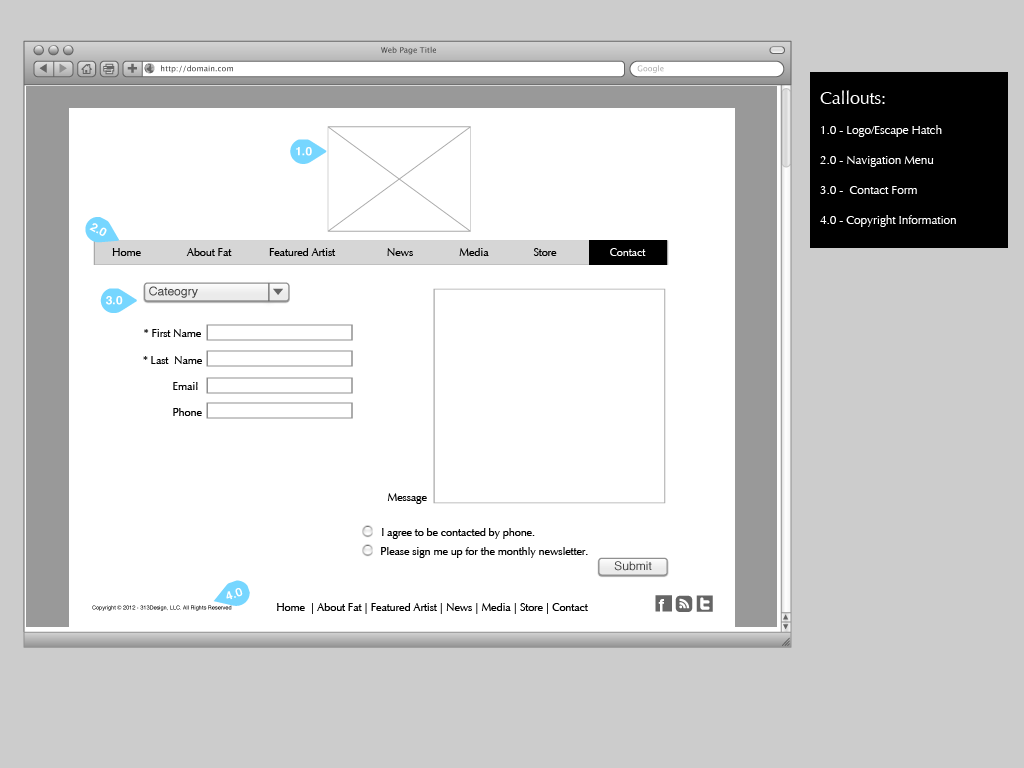
<style>
.page{position:relative;width:1024px;height:768px;background:#ffffff}
.page>*{position:absolute;margin:0}
.t1{font:12px/30px "Optima-Regular";letter-spacing:-0.015em;color:#ffffff}
.t2{font:18px/30px "Optima-Regular";letter-spacing:-0.015em;color:#ffffff}
.t3{font:11px "Optima-Regular";letter-spacing:-0.015em;color:#000000}
.t4{font:11px "Optima-Regular";letter-spacing:-0.015em;color:#ffffff}
</style>
<div class="page">
<p class="t1" style="left:820px;top:90px;width:136px;height:137px"><span class="t2">Callouts:<br></span>1.0 - Logo/Escape Hatch<br>2.0 - Navigation Menu<br>3.0 -  Contact Form<br>4.0 - Copyright Information</p>
<p class="t3" style="left:112px;top:248px;width:29px;height:8px">Home</p>
<p class="t3" style="left:186px;top:248px;width:46px;height:8px">About Fat</p>
<p class="t3" style="left:269px;top:248px;width:67px;height:8px">Featured Artist</p>
<p class="t3" style="left:387px;top:248px;width:26px;height:8px">News</p>
<p class="t3" style="left:459px;top:248px;width:30px;height:8px">Media</p>
<p class="t3" style="left:533px;top:248px;width:24px;height:8px">Store</p>
<p class="t4" style="left:610px;top:248px;width:36px;height:8px">Contact</p>
<p class="t3" style="left:144px;top:329px;width:57px;height:8px">* First Name</p>
<p class="t3" style="left:143px;top:356px;width:59px;height:8px">* Last  Name</p>
<p class="t3" style="left:173px;top:382px;width:25px;height:8px">Email</p>
<p class="t3" style="left:173px;top:408px;width:29px;height:8px">Phone</p>
<p class="t3" style="left:387px;top:493px;width:40px;height:11px">Message</p>
<p class="t3" style="left:382px;top:528px;width:153px;height:11px">I agree to be contacted by phone.</p>
<p class="t3" style="left:381px;top:547px;width:207px;height:11px">Please sign me up for the monthly newsletter.</p>
<p class="t3" style="left:277px;top:603px;width:311px;height:11px">Home  | About Fat | Featured Artist | News | Media | Store | Contact</p>
</div>
